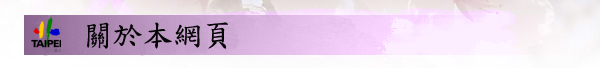
<style>
.page{position:relative;width:600px;height:68px}
.page>*{position:absolute;margin:0}
.t1{font:30px "DFKaiShu-SB-Estd-BF";color:#050505}
</style>
<div class="page">
<p class="t1" style="left:87px;top:22px;width:141px;height:27px">關於本網頁</p>
</div>
